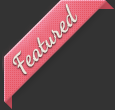
<style>
.page{position:relative;width:115px;height:110px;background:#333333}
.page>*{position:absolute;margin:0}
.t1{font:25px "DancingScript";letter-spacing:-0.01em;color:#ece6db;font-weight:bold}
</style>
<div class="page">
<p class="t1" style="left:12px;top:4px;width:65px;height:71px;rotate:-45deg">Featured</p>
</div>
